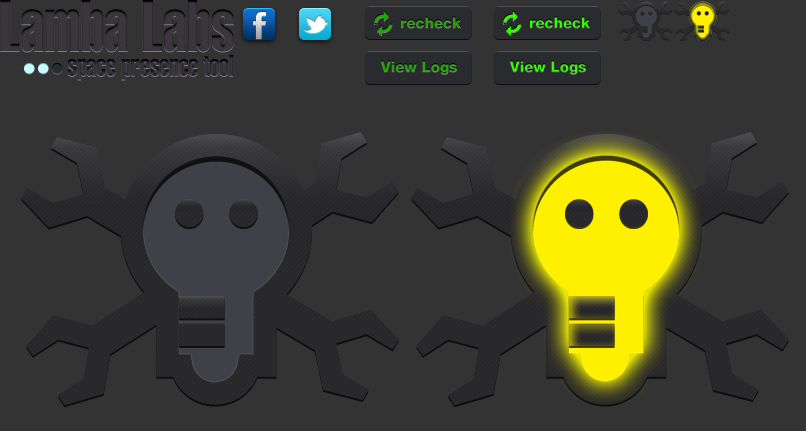
<style>
.page{position:relative;width:806px;height:431px;background:#333333}
.page>*{position:absolute;margin:0}
.t1{font:15px "Helvetica85-Heavy"}
.t2{font:29px "Helvetica-ExtraCompressed";color:#322e33}
</style>
<div class="page">
<p class="t1" style="left:401px;top:16px;width:61px;height:12px">recheck</p>
<p class="t1" style="left:530px;top:16px;width:61px;height:12px">recheck</p>
<p class="t2" style="left:67px;top:55px;width:166px;height:25px">space presence tool</p>
<p class="t1" style="left:380px;top:60px;width:77px;height:14px">View Logs</p>
<p class="t1" style="left:509px;top:60px;width:77px;height:14px">View Logs</p>
</div>
